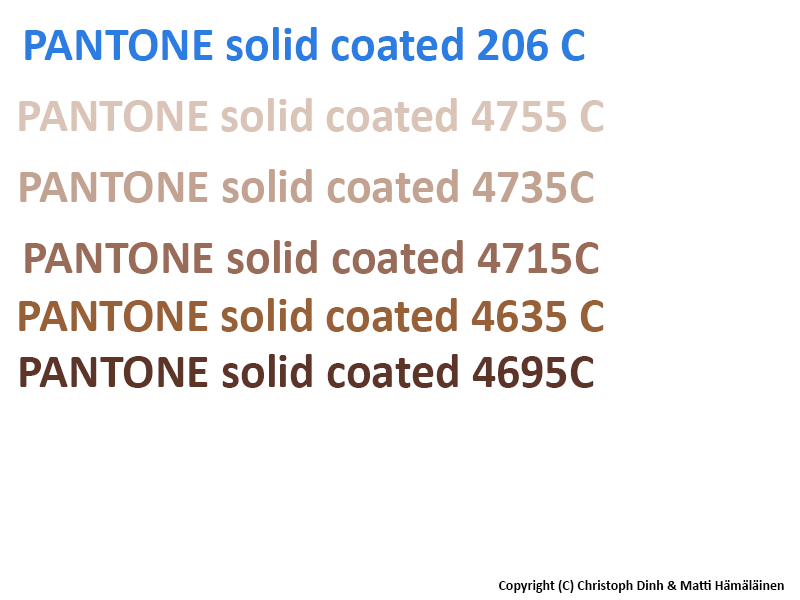
<style>
.page{position:relative;width:800px;height:600px;background:#ffffff}
.page>*{position:absolute;margin:0}
.t1{font:48px "Calibri-Bold";color:#2b7de1}
.t2{font:48px "Calibri-Bold";color:#dac3b7}
.t3{font:48px "Calibri-Bold";color:#c2a392}
.t4{font:48px "Calibri-Bold";color:#996b59}
.t5{font:48px "Calibri-Bold";color:#976036}
.t6{font:48px "Calibri-Bold";color:#5d3428}
.t7{font:14px "Calibri-Bold";color:#000000}
</style>
<div class="page">
<p class="t1" style="left:25px;top:27px;width:560px;height:34px">PANTONE solid coated 206 C</p>
<p class="t2" style="left:19px;top:98px;width:585px;height:34px">PANTONE solid coated 4755 C</p>
<p class="t3" style="left:20px;top:169px;width:574px;height:34px">PANTONE solid coated 4735C</p>
<p class="t4" style="left:25px;top:240px;width:574px;height:34px">PANTONE solid coated 4715C</p>
<p class="t5" style="left:19px;top:298px;width:585px;height:34px">PANTONE solid coated 4635 C</p>
<p class="t6" style="left:20px;top:354px;width:574px;height:34px">PANTONE solid coated 4695C</p>
<p class="t7" style="left:499px;top:580px;width:285px;height:13px">Copyright (C) Christoph Dinh &amp; Matti Hämäläinen</p>
</div>
